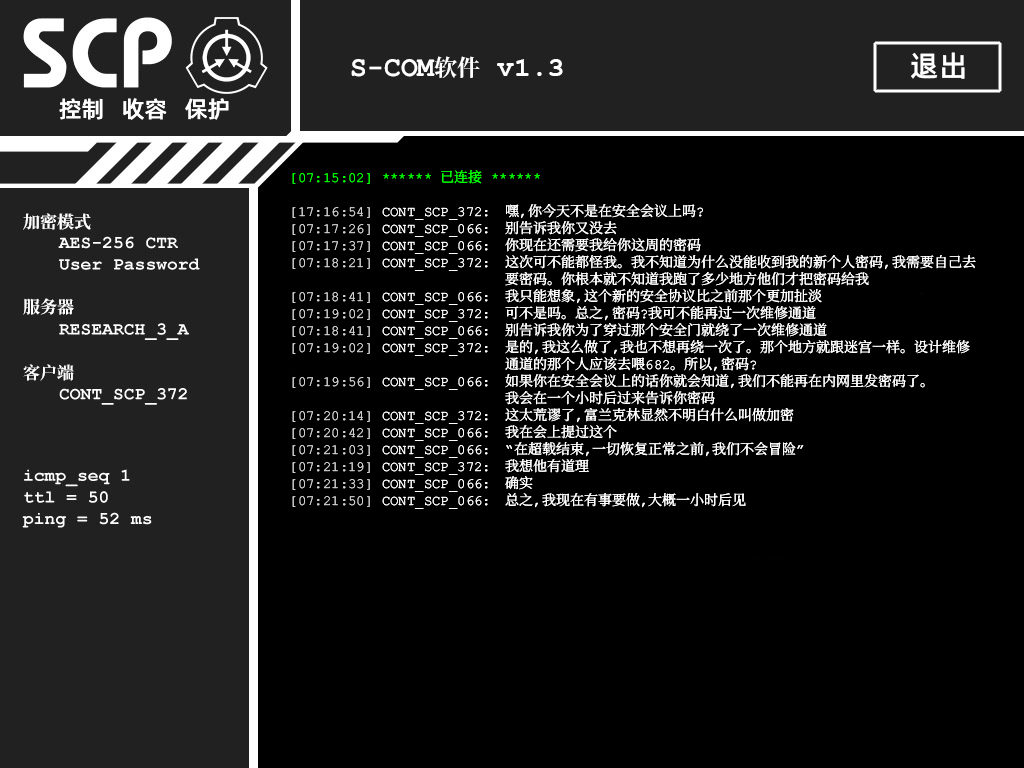
<style>
.page{position:relative;width:1024px;height:768px;background:#000000}
.page>*{position:absolute;margin:0}
.t1{font:29px "AlibabaPuHuiTiM";color:#ffffff}
.t2{font:28px "ContainmentBreach-Bold";color:#ffffff}
.t3{font:23px "ContainmentBreach-Bold";color:#ffffff}
.t4{font:28px "CourierNewPS-BoldMT";color:#ffffff}
.t5{font:23px "AlibabaPuHuiTiM";color:#ffffff}
.t6{font:14px/17px "ContainmentBreach-Regular";color:#ffffff}
.t7{font:14px/17px "ContainmentBreach-Regular";color:#00ff00}
.t8{font:14px/17px "ContainmentBreach-Regular";color:#cfcfcf}
.t9{font:17px/17px "ContainmentBreach-Bold";color:#ffffff}
.t10{font:17px/15px "ContainmentBreach-Bold";color:#ffffff}
</style>
<div class="page">
<p class="t1" style="left:911px;top:52px;width:54px;height:27px">退出</p>
<p class="t2" style="left:351px;top:56px;width:212px;height:22px">S-COM<span class="t3">软件 </span><span class="t4">v1.3</span></p>
<p class="t5" style="left:59px;top:98px;width:170px;height:22px">控制   收容   保护</p>
<p class="t6" style="left:292px;top:170px;width:684px;height:339px"><span class="t7">[07:15:02] ****** 已连接 ******<br><br></span><span class="t8">【17:16:54】</span> CONT_SCP_372： 嘿，你今天不是在安全会议上吗？<br><span class="t8">【07:17:26】</span> CONT_SCP_066： 别告诉我你又没去<br><span class="t8">【07:17:37】</span> CONT_SCP_066： 你现在还需要我给你这周的密码<br><span class="t8">【07:18:21】</span> CONT_SCP_372： 这次可不能都怪我。我不知道为什么没能收到我的新个人密码，我需要自己去<br>      要密码。你根本就不知道我跑了多少地方他们才把密码给我<br><span class="t8">【07:18:41】</span> CONT_SCP_066： 我只能想象，这个新的安全协议比之前那个更加扯淡<br><span class="t8">【07:19：02】</span> CONT_SCP_372： 可不是吗。总之，密码？我可不能再过一次维修通道<br><span class="t8">【07:18:41】</span> CONT_SCP_066： 别告诉我你为了穿过那个安全门就绕了一次维修通道<br><span class="t8">【07:19:02】</span> CONT_SCP_372： 是的，我这么做了，我也不想再绕一次了。那个地方就跟迷宫一样。设计维修<br>      通道的那个人应该去喂682。所以，密码？<br><span class="t8">【07:19:56】</span> CONT_SCP_066： 如果你在安全会议上的话你就会知道，我们不能再在内网里发密码了。<br>      我会在一个小时后过来告诉你密码<br><span class="t8">【07:20:14】</span> CONT_SCP_372: 这太荒谬了，富兰克林显然不明白什么叫做加密<br><span class="t8">【07:20:42】</span> CONT_SCP_066： 我在会上提过这个<br><span class="t8">【07:21:03】</span> CONT_SCP_066: “在超载结束，一切恢复正常之前，我们不会冒险”<br><span class="t8">【07:21:19】</span> CONT_SCP_372: 我想他有道理<br><span class="t8">【07:21:33】</span> CONT_SCP_066: 确实<br><span class="t8">【07:21:50】</span> CONT_SCP_066: 总之，我现在有事要做，大概一小时后见</p>
<p class="t9" style="left:23px;top:213px;width:68px;height:168px">加密模式<br><br><br><br><br>服务器<br><br><br><span class="t10"><br>客户端</span></p>
</div>
